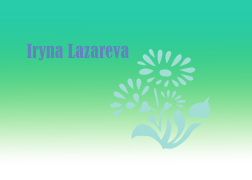
<style>
.page{position:relative;width:252px;height:180px}
.page>*{position:absolute;margin:0}
.t1{font:18px "BernardMT-Condensed";color:#6183c0}
</style>
<div class="page">
<p class="t1" style="left:27px;top:43px;width:102px;height:18px">Iryna Lazareva</p>
</div>
